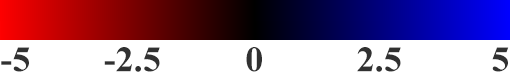
<style>
.page{position:relative;width:510px;height:80px;background:#ffffff}
.page>*{position:absolute;margin:0}
.t1{font:36px "TimesNewRomanPS-BoldMT";color:#313131}
</style>
<div class="page">
<p class="t1" style="left:1px;top:47px;width:29px;height:25px">-5</p>
<p class="t1" style="left:104px;top:47px;width:56px;height:25px">-2.5</p>
<p class="t1" style="left:246px;top:47px;width:16px;height:25px">0</p>
<p class="t1" style="left:357px;top:47px;width:44px;height:25px">2.5</p>
<p class="t1" style="left:492px;top:47px;width:17px;height:25px">5</p>
</div>
